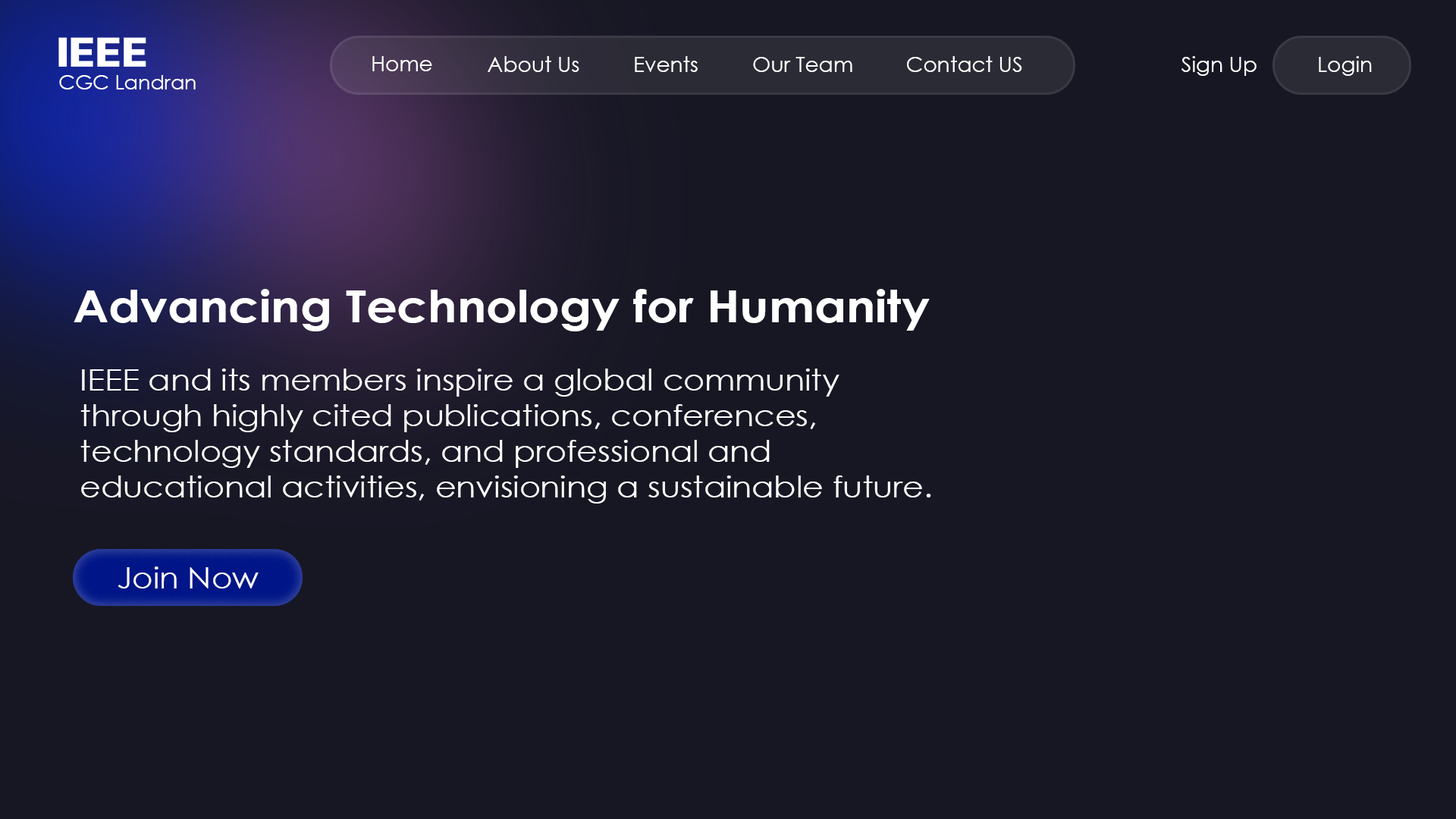
<style>
.page{position:relative;width:1456px;height:819px;background:#171724}
.page>*{position:absolute;margin:0}
.t1{font:21.2px "CenturyGothic";color:#ffffff}
.t2{font:20.3px "CenturyGothic";color:#ffffff}
.t3{font:44.3px "CenturyGothic-Bold";color:#ffffff;scale:1.09 1}
.t4{font:29.6px "CenturyGothic";color:#ffffff;scale:1.09 1}
.t5{font:29.3px "CenturyGothic";color:#ffffff;scale:1.09 1}
</style>
<div class="page">
<p class="t1" style="left:372px;top:56px;width:60px;height:15px">Home</p>
<p class="t1" style="left:488px;top:56px;width:91px;height:16px">About Us</p>
<p class="t1" style="left:635px;top:56px;width:63px;height:16px">Events</p>
<p class="t1" style="left:753px;top:57px;width:99px;height:15px">Our Team</p>
<p class="t1" style="left:907px;top:56px;width:115px;height:16px">Contact US</p>
<p class="t1" style="left:1181px;top:56px;width:76px;height:20px">Sign Up</p>
<p class="t1" style="left:1319px;top:56px;width:53px;height:20px">Login</p>
<p class="t2" style="left:59px;top:75px;width:137px;height:14px">CGC Landran</p>
<p class="t3" style="left:74px;top:289px;width:856px;height:42px">Advancing Technology for Humanity</p>
<p class="t4" style="left:80px;top:369px;width:851px;height:135px">IEEE and its members inspire a global community through highly cited publications, conferences, technology standards, and professional and educational activities, envisioning a sustainable future.</p>
<p class="t5" style="left:118px;top:566px;width:141px;height:22px">Join Now</p>
</div>
